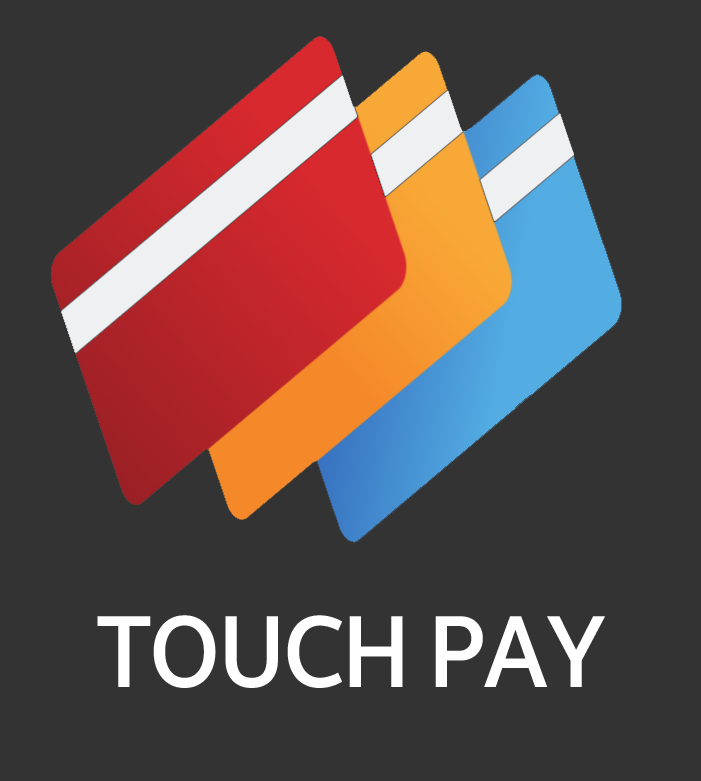
<style>
.page{position:relative;width:701px;height:781px;background:#333333}
.page>*{position:absolute;margin:0}
.t1{font:100px "BreezeSans-Medium";letter-spacing:-0.025em;color:#ffffff;scale:0.95 1}
</style>
<div class="page">
<p class="t1" style="left:97px;top:615px;width:508px;height:73px">TOUCH PAY</p>
</div>
